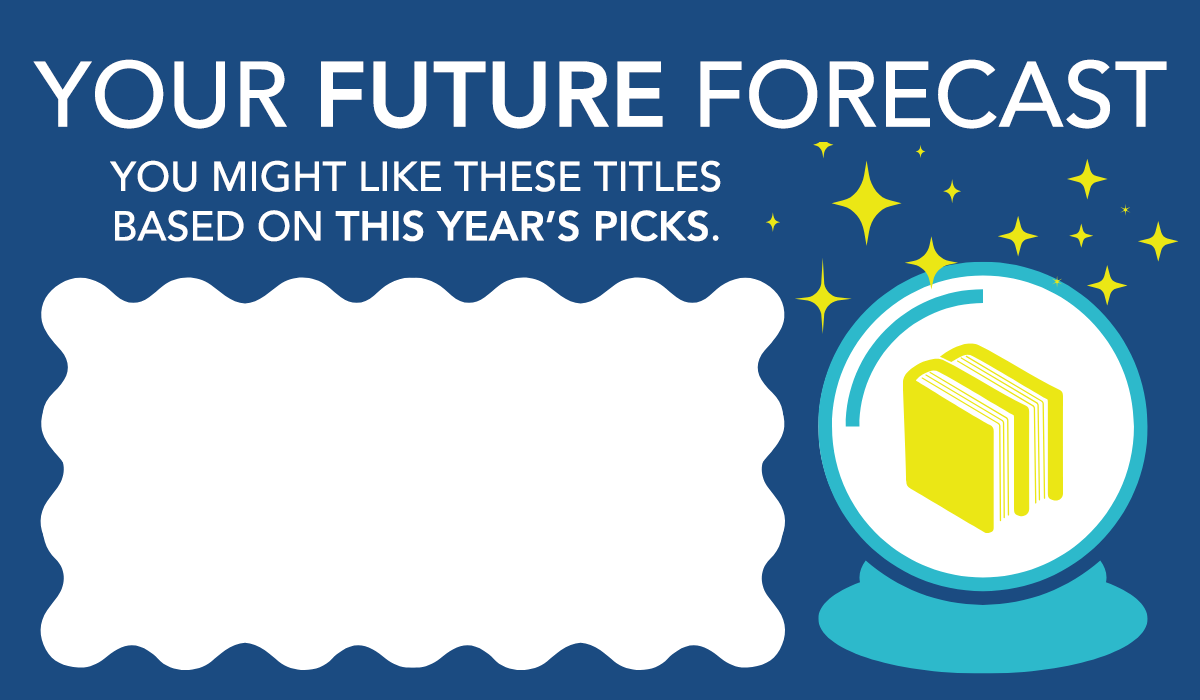
<style>
.page{position:relative;width:1200px;height:700px;background:#1b4b81}
.page>*{position:absolute;margin:0}
.t1{font:92px "Avenir-Medium";color:#ffffff}
.t2{font:92px "Avenir-Heavy";color:#ffffff}
.t3{font:41.3px "Avenir-Medium";color:#ffffff}
.t4{font:41.3px "Avenir-Heavy";color:#ffffff}
</style>
<div class="page">
<p class="t1" style="left:33px;top:59px;width:1134px;height:70px">YOUR <span class="t2">FUTURE</span> FORECAST</p>
<p class="t3" style="left:110px;top:160px;width:611px;height:82px;text-align:center">YOU MIGHT LIKE THESE TITLES<br>BASED ON <span class="t4">THIS YEAR’S PICKS</span>.</p>
</div>
